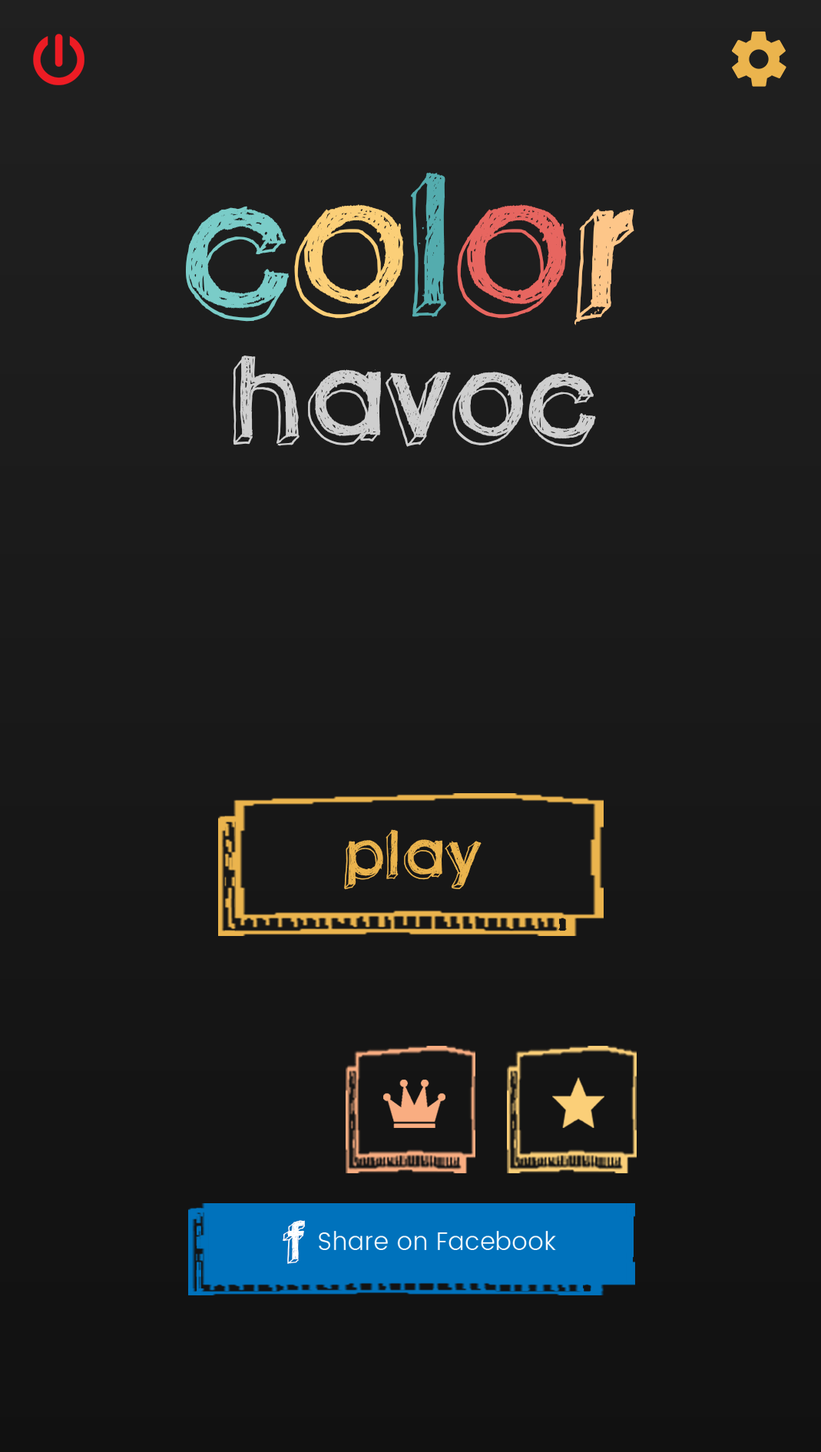
<style>
.page{position:relative;width:821px;height:1452px}
.page>*{position:absolute;margin:0}
.t1{font:167.3px/130px "Greenpiloww";color:#cfcfcf;text-transform:uppercase}
.t2{font:258.3px/130px "Greenpiloww";color:#7accc8;text-transform:uppercase}
.t3{font:258.3px/130px "Greenpiloww";color:#fbcf78;text-transform:uppercase}
.t4{font:258.3px/130px "Greenpiloww";color:#54acae;text-transform:uppercase}
.t5{font:258.3px/130px "Greenpiloww";color:#e76660;text-transform:uppercase}
.t6{font:258.3px/130px "Greenpiloww";color:#fdc689;text-transform:uppercase}
.t7{font:87.9px "Greenpiloww";color:#ebb44d;text-transform:uppercase}
.t8{font:77.4px "Greenpiloww";color:#ffffff;text-transform:uppercase;scale:1.12 1}
</style>
<div class="page">
<p class="t1" style="left:186px;top:172px;width:448px;height:275px;text-align:center"><span class="t2">c</span><span class="t3">o</span><span class="t4">l</span><span class="t5">o</span><span class="t6">r<br></span>havoc</p>
<p class="t7" style="left:344px;top:829px;width:138px;height:61px">play</p>
<p class="t8" style="left:283px;top:1220px;width:22px;height:44px">f</p>
</div>
